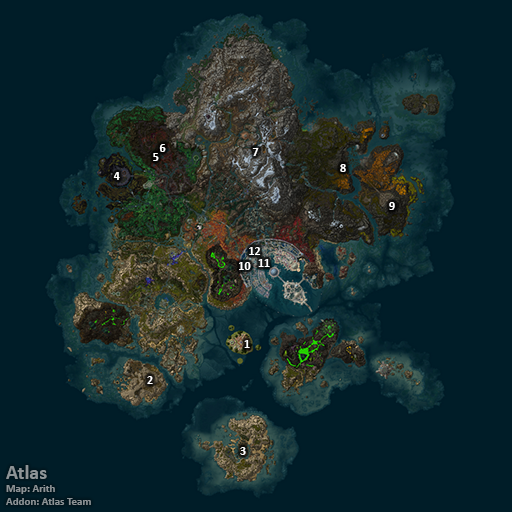
<style>
.page{position:relative;width:512px;height:512px;background:#001d28}
.page>*{position:absolute;margin:0}
.t1{font:12px "Calibri-Bold";color:#ffffff}
.t2{font:11px "Calibri-Bold";color:#8d9396}
.t3{font:20px "Calibri-Bold";color:#8d9396}
</style>
<div class="page">
<p class="t1" style="left:159px;top:144px;width:7px;height:8px">6</p>
<p class="t1" style="left:252px;top:148px;width:7px;height:8px">7</p>
<p class="t1" style="left:153px;top:153px;width:6px;height:8px">5</p>
<p class="t1" style="left:113px;top:172px;width:7px;height:8px">4</p>
<p class="t1" style="left:340px;top:164px;width:6px;height:8px">8</p>
<p class="t1" style="left:389px;top:202px;width:6px;height:8px">9</p>
<p class="t1" style="left:249px;top:247px;width:12px;height:8px">12</p>
<p class="t1" style="left:239px;top:262px;width:12px;height:8px">10</p>
<p class="t1" style="left:258px;top:259px;width:12px;height:8px">11</p>
<p class="t1" style="left:244px;top:340px;width:6px;height:8px">1</p>
<p class="t1" style="left:147px;top:376px;width:6px;height:8px">2</p>
<p class="t1" style="left:240px;top:447px;width:6px;height:8px">3</p>
<p class="t2" style="left:6px;top:465px;width:85px;height:40px"><span class="t3">Atlas<br></span>Map: Arith<br>Addon: Atlas Team</p>
</div>
